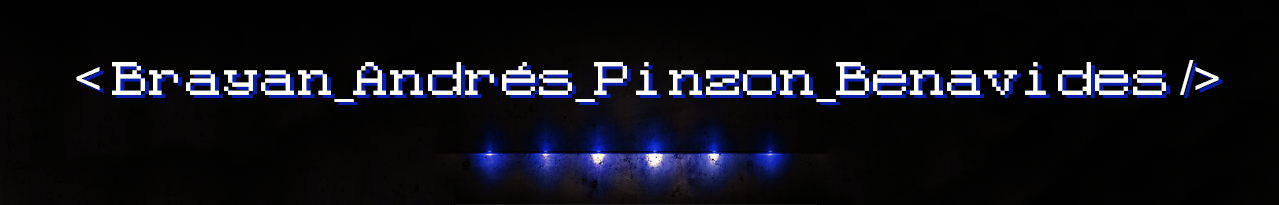
<style>
.page{position:relative;width:1279px;height:205px}
.page>*{position:absolute;margin:0}
.t1{font:33px "Code-8x8";color:#fefffa}
.t2{font:48px "ArialMT";color:#fefffa}
.t3{font:33px "ArialMT";color:#fefffa}
.t4{font:33px "Code-8x8";color:#091eab}
.t5{font:48px "ArialMT";color:#091eab}
.t6{font:33px "ArialMT";color:#091eab}
</style>
<div class="page">
<p class="t1" style="left:76px;top:60px;width:1143px;height:42px"><span class="t2">&lt; </span>Brayan<span class="t3">_</span>Andrés<span class="t3">_</span>Pinzon<span class="t3">_</span>Benavides <span class="t2">/&gt;</span></p>
<p class="t4" style="left:80px;top:63px;width:1143px;height:42px"><span class="t5">&lt; </span>Brayan<span class="t6">_</span>Andrés<span class="t6">_</span>Pinzon<span class="t6">_</span>Benavides <span class="t5">/&gt;</span></p>
</div>
